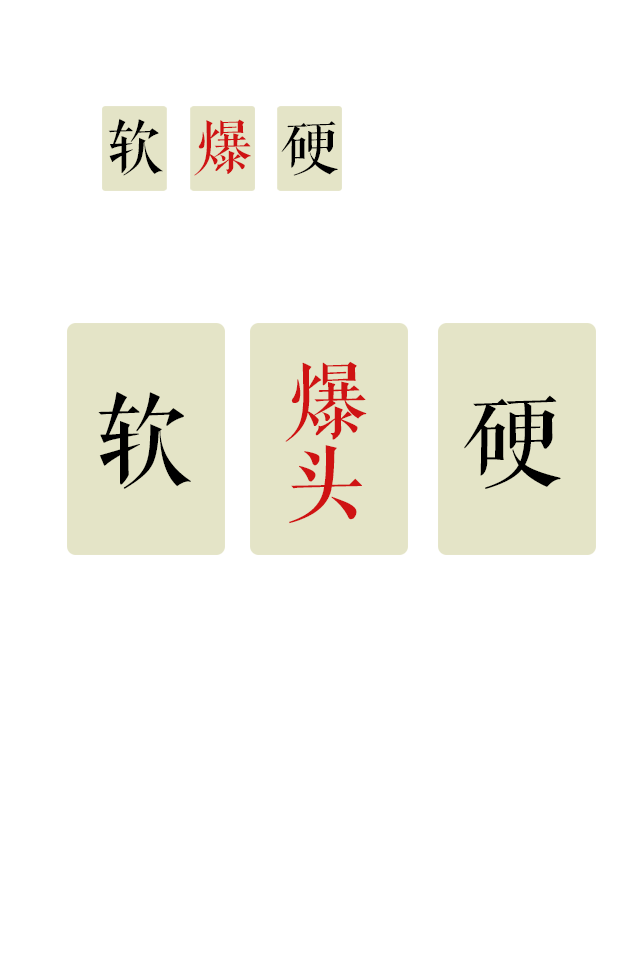
<style>
.page{position:relative;width:640px;height:960px;background:#ffffff}
.page>*{position:absolute;margin:0}
.t1{font:58.3px "FZQKBYSJW--GB1-0";color:#000000}
.t2{font:58.3px "FZQKBYSJW--GB1-0";color:#cf1313}
.t3{font:83.3px/83.3px "FZQKBYSJW--GB1-0";color:#cf1313}
.t4{font:100px "FZQKBYSJW--GB1-0";color:#000000}
</style>
<div class="page">
<p class="t1" style="left:108px;top:118px;width:55px;height:58px">软</p>
<p class="t2" style="left:194px;top:119px;width:57px;height:57px">爆</p>
<p class="t1" style="left:281px;top:121px;width:57px;height:55px">硬</p>
<p class="t3" style="left:285px;top:361px;width:82px;height:163px">爆<br>头</p>
<p class="t4" style="left:98px;top:391px;width:93px;height:98px">软</p>
<p class="t4" style="left:464px;top:395px;width:97px;height:94px">硬</p>
</div>
